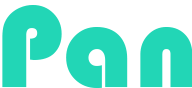
<style>
.page{position:relative;width:192px;height:88px;background:#22d6b6}
.page>*{position:absolute;margin:0}
.t1{font:120px "Bauhaus93";color:#22d6b6}
</style>
<div class="page">
<p class="t1" style="left:2px;top:5px;width:191px;height:83px">Pan</p>
</div>
